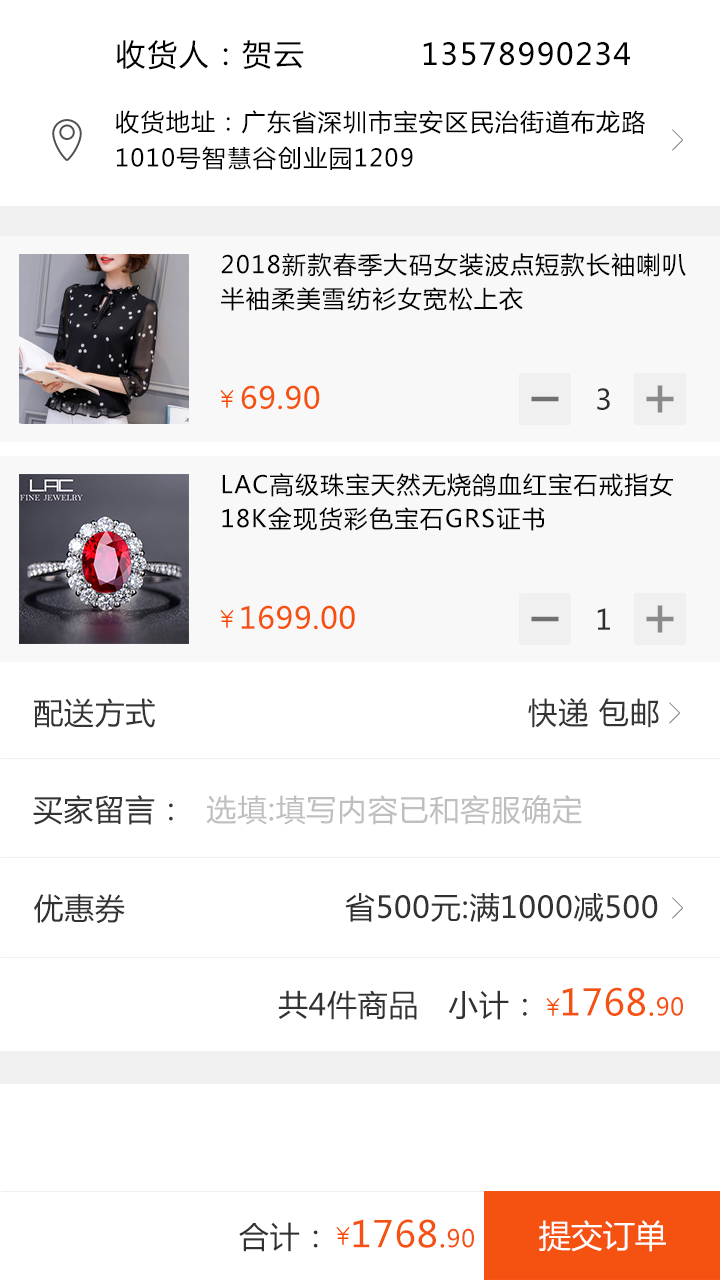
<style>
.page{position:relative;width:720px;height:1280px;background:#ffffff}
.page>*{position:absolute;margin:0}
.t1{font:30px "MicrosoftYaHei";letter-spacing:0.055em;color:#000000;text-transform:uppercase}
.t2{font:24px/36px "MicrosoftYaHei";letter-spacing:0.055em;color:#000000;text-transform:uppercase}
.t3{font:24px/34px "MicrosoftYaHei";letter-spacing:0.055em;color:#000000;text-transform:uppercase}
.t4{font:30px "MicrosoftYaHei";letter-spacing:0.025em;color:#f55212;text-transform:uppercase}
.t5{font:28px "MicrosoftYaHei";letter-spacing:0.055em;color:#2e2e2e;text-transform:uppercase}
.t6{font:30px "MicrosoftYaHei";letter-spacing:0.025em;color:#343434;text-transform:uppercase}
.t7{font:30px "MicrosoftYaHei";letter-spacing:0.025em;color:#bfbfbf;text-transform:uppercase}
.t8{font:30px "MicrosoftYaHei";letter-spacing:0.025em;color:#323232;text-transform:uppercase}
.t9{font:36px "MicrosoftYaHei";letter-spacing:0.025em;color:#f55212;text-transform:uppercase}
.t10{font:24px "MicrosoftYaHei";letter-spacing:0.025em;color:#f55212;text-transform:uppercase}
.t11{font:32px "MicrosoftYaHei";color:#ffffff;text-transform:uppercase}
</style>
<div class="page">
<p class="t1" style="left:116px;top:40px;width:514px;height:30px">收货人：贺云           13578990234</p>
<p class="t2" style="left:115px;top:110px;width:530px;height:60px">收货地址：广东省深圳市宝安区民治街道布龙路<br>1010号智慧谷创业园1209</p>
<p class="t3" style="left:221px;top:253px;width:465px;height:58px">2018新款春季大码女装波点短款长袖喇叭<br>半袖柔美雪纺衫女宽松上衣</p>
<p class="t4" style="left:241px;top:385px;width:79px;height:25px">69.90</p>
<p class="t5" style="left:597px;top:388px;width:13px;height:22px">3</p>
<p class="t3" style="left:222px;top:473px;width:451px;height:58px">LAC高级珠宝天然无烧鸽血红宝石戒指女<br>18k金现货彩色宝石GRS证书</p>
<p class="t4" style="left:241px;top:605px;width:114px;height:25px">1699.00</p>
<p class="t5" style="left:597px;top:608px;width:13px;height:22px">1</p>
<p class="t6" style="left:34px;top:698px;width:121px;height:30px">配送方式</p>
<p class="t6" style="left:528px;top:698px;width:131px;height:30px">快递 包邮</p>
<p class="t6" style="left:33px;top:795px;width:140px;height:30px">买家留言：</p>
<p class="t7" style="left:206px;top:795px;width:376px;height:30px">选填:填写内容已和客服确定</p>
<p class="t8" style="left:34px;top:894px;width:91px;height:30px">优惠券</p>
<p class="t8" style="left:345px;top:893px;width:313px;height:29px">省500元:满1000减500</p>
<p class="t8" style="left:278px;top:987px;width:405px;height:33px">共4件商品   小计：  <span class="t9">1768</span><span class="t4">.</span><span class="t10">90</span></p>
<p class="t9" style="left:239px;top:1219px;width:235px;height:33px"><span class="t8">合计：  </span>1768<span class="t4">.</span><span class="t10">90</span></p>
<p class="t11" style="left:539px;top:1220px;width:127px;height:32px">提交订单</p>
</div>
